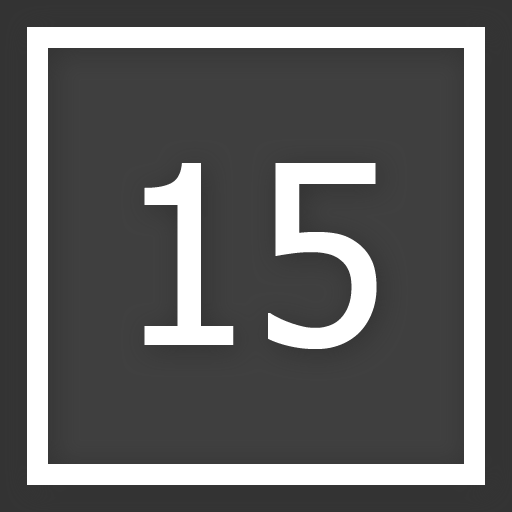
<style>
.page{position:relative;width:512px;height:512px;background:#3f3f3f}
.page>*{position:absolute;margin:0}
.t1{font:250px "Tahoma";color:#ffffff}
</style>
<div class="page">
<p class="t1" style="left:144px;top:163px;width:233px;height:186px">15</p>
</div>
